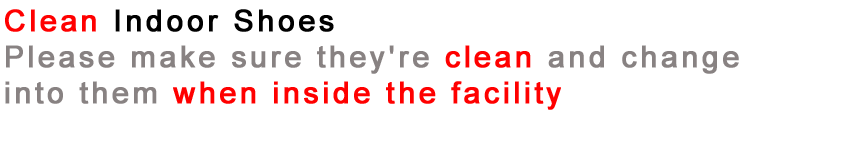
<style>
.page{position:relative;width:847px;height:145px;background:#ffffff}
.page>*{position:absolute;margin:0}
.t1{font:30px/36px "ArialMT";letter-spacing:0.1em;color:#888282;font-weight:bold}
.t2{font:30px/36px "ArialMT";letter-spacing:0.1em;color:#ff0000;font-weight:bold}
.t3{font:30px/36px "ArialMT";letter-spacing:0.1em;color:#000000;font-weight:bold}
</style>
<div class="page">
<p class="t1" style="left:5px;top:9px;width:734px;height:101px"><span class="t2">Clean</span><span class="t3"> Indoor Shoes<br></span>Please make sure they're <span class="t2">clean</span> and change<br>into them <span class="t2">when inside the facility</span></p>
</div>
